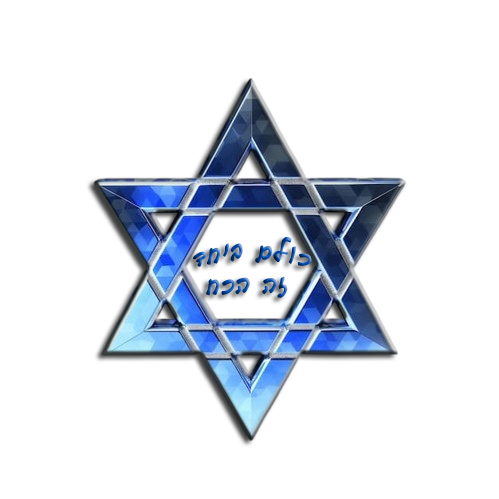
<style>
.page{position:relative;width:499px;height:499px;background:#ffffff}
.page>*{position:absolute;margin:0}
.t1{font:22.9px "GuttmanYad-Brush"}
</style>
<div class="page">
<p class="t1" style="left:193px;top:237px;width:119px;height:61px;text-align:center">כולם ביחד<br> זה הכח</p>
</div>
